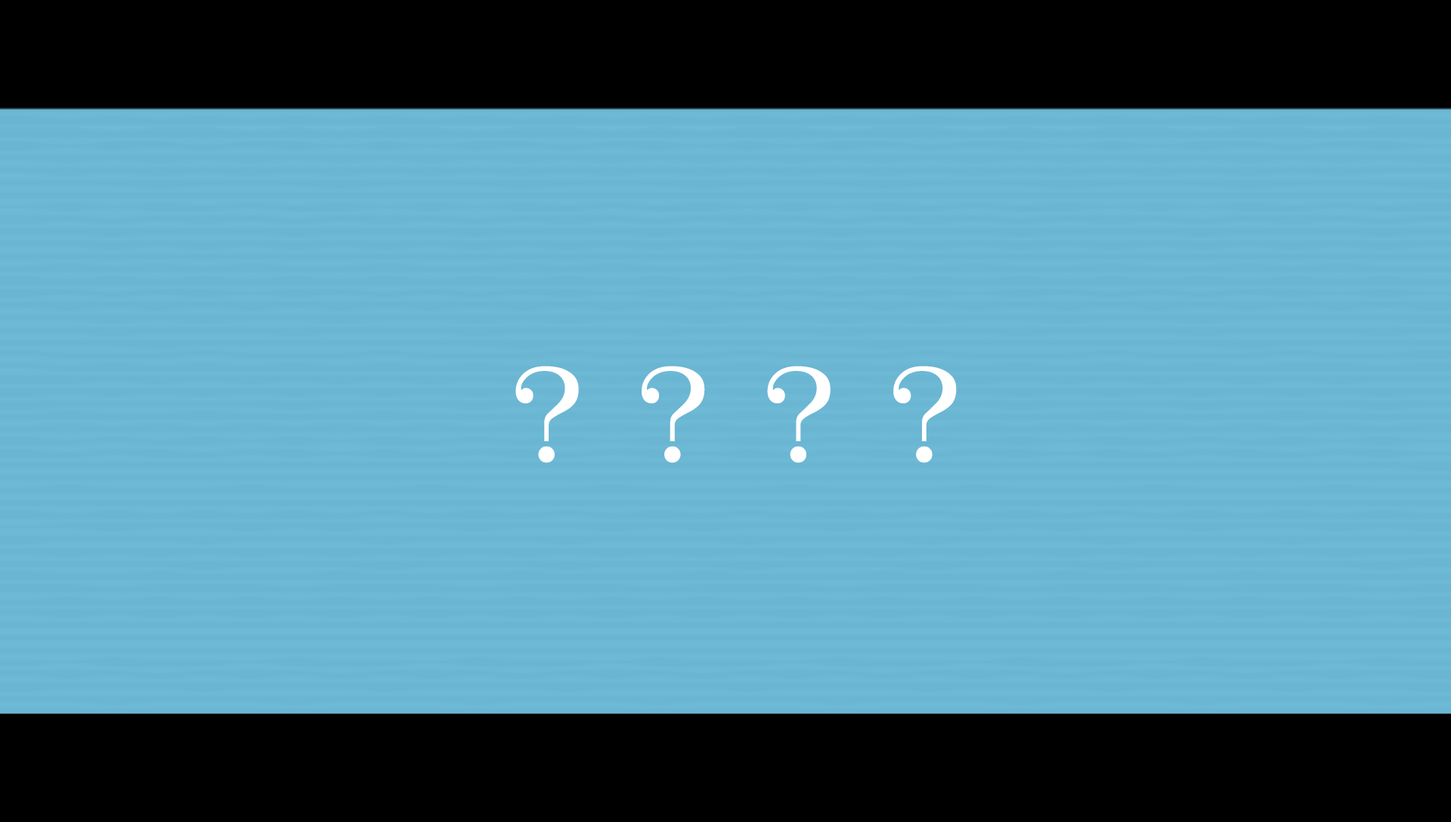
<style>
.page{position:relative;width:1451px;height:822px;background:#6ab6d2}
.page>*{position:absolute;margin:0}
.t1{font:107.6px "HGMinchoB";letter-spacing:0.17em;color:#ffffff}
</style>
<div class="page">
<p class="t1" style="left:515px;top:366px;width:442px;height:97px">？？？？</p>
</div>
